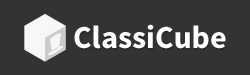
<style>
.page{position:relative;width:250px;height:75px;background:#333333}
.page>*{position:absolute;margin:0}
.t1{font:32px "SourceSansPro-Bold";color:#ffffff}
</style>
<div class="page">
<p class="t1" style="left:74px;top:24px;width:152px;height:25px">ClassiCube</p>
</div>
